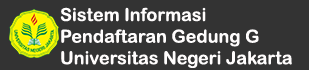
<style>
.page{position:relative;width:309px;height:70px;background:#333333}
.page>*{position:absolute;margin:0}
.t1{font:18px "ArialRoundedMTBold";color:#fffdfd}
</style>
<div class="page">
<p class="t1" style="left:60px;top:7px;width:232px;height:61px;text-align:right">Sistem Informasi <br>Pendaftaran Gedung G <br>Universitas Negeri Jakarta</p>
</div>
